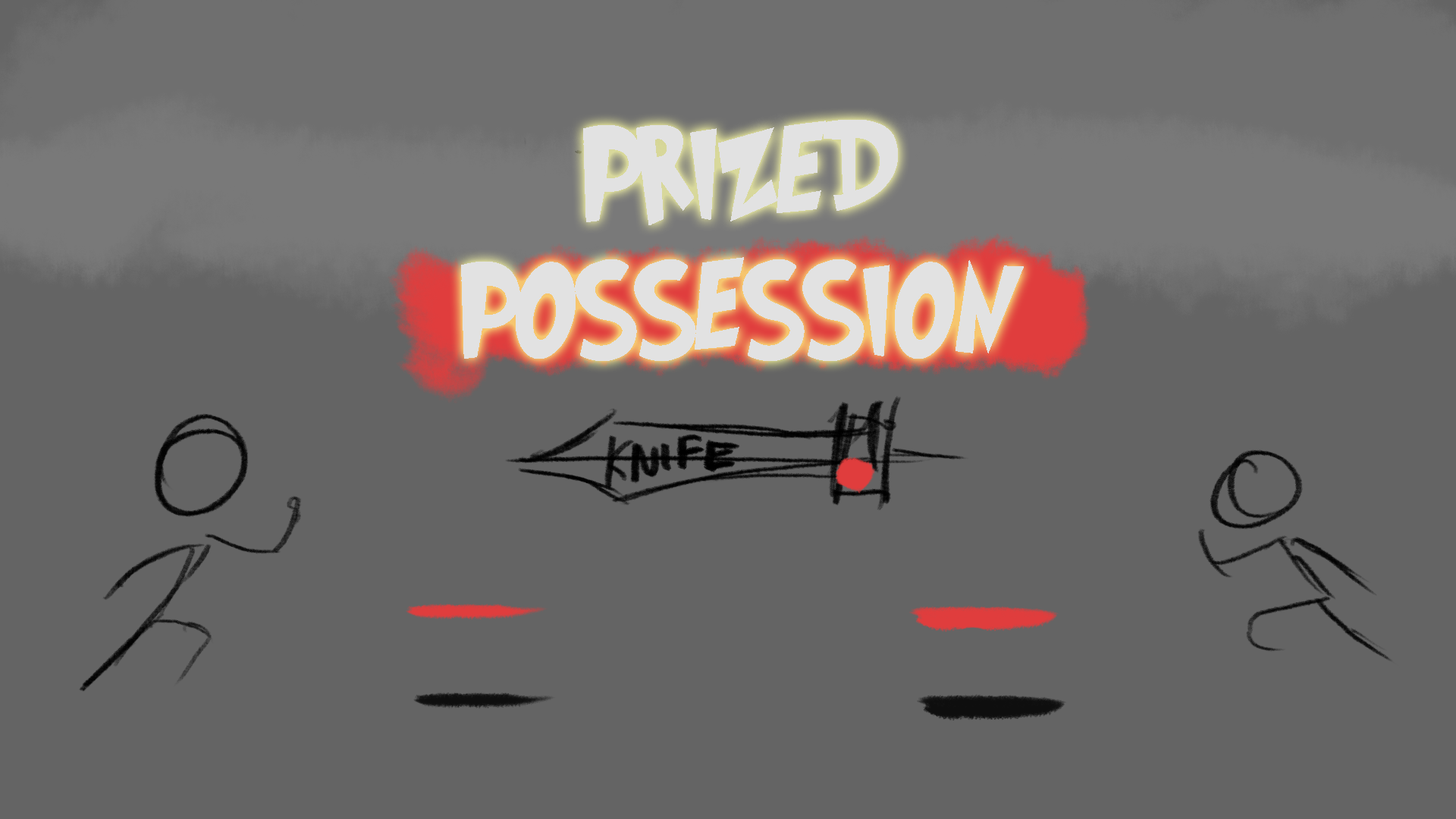
<style>
.page{position:relative;width:1456px;height:819px;background:#646464}
.page>*{position:absolute;margin:0}
.t1{font:113.7px "NewUnicodeFont";color:#e2e2e2}
</style>
<div class="page">
<p class="t1" style="left:461px;top:120px;width:563px;height:241px;text-align:center">PRIZED<br>POSSESSION</p>
</div>
